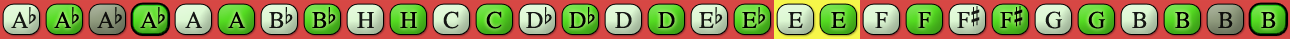
<style>
.page{position:relative;width:1290px;height:39px}
.page>*{position:absolute;margin:0}
.t1{font:24px "OpusChords";color:#000000}
.t2{font:24px "OpusChords";letter-spacing:-0.05em;color:#000000}
</style>
<div class="page">
<p class="t1" style="left:957px;top:6px;width:23px;height:22px;opacity:0.9">F#</p>
<p class="t1" style="left:1000px;top:6px;width:23px;height:22px">F#</p>
<p class="t2" style="left:11px;top:7px;width:25px;height:21px;opacity:0.9">Ab</p>
<p class="t2" style="left:54px;top:7px;width:25px;height:21px">Ab</p>
<p class="t2" style="left:97px;top:7px;width:25px;height:21px;opacity:0.9">Ab</p>
<p class="t2" style="left:140px;top:7px;width:25px;height:21px">Ab</p>
<p class="t1" style="left:185px;top:11px;width:17px;height:17px;opacity:0.9">A</p>
<p class="t1" style="left:228px;top:11px;width:17px;height:17px">A</p>
<p class="t1" style="left:269px;top:7px;width:24px;height:21px;opacity:0.9">Bb</p>
<p class="t1" style="left:312px;top:7px;width:24px;height:21px">Bb</p>
<p class="t1" style="left:357px;top:12px;width:17px;height:16px;opacity:0.9">H</p>
<p class="t1" style="left:400px;top:12px;width:17px;height:16px">H</p>
<p class="t1" style="left:443px;top:11px;width:16px;height:18px;opacity:0.9">C</p>
<p class="t1" style="left:486px;top:11px;width:16px;height:18px">C</p>
<p class="t1" style="left:526px;top:7px;width:26px;height:21px;opacity:0.9">Db</p>
<p class="t1" style="left:569px;top:7px;width:26px;height:21px">Db</p>
<p class="t1" style="left:615px;top:12px;width:17px;height:16px;opacity:0.9">D</p>
<p class="t1" style="left:658px;top:12px;width:17px;height:16px">D</p>
<p class="t1" style="left:699px;top:7px;width:24px;height:21px;opacity:0.9">Eb</p>
<p class="t1" style="left:742px;top:7px;width:24px;height:21px">Eb</p>
<p class="t1" style="left:788px;top:12px;width:15px;height:16px;opacity:0.9">E</p>
<p class="t1" style="left:831px;top:12px;width:15px;height:16px">E</p>
<p class="t1" style="left:875px;top:12px;width:13px;height:16px;opacity:0.9">F</p>
<p class="t1" style="left:918px;top:12px;width:13px;height:16px">F</p>
<p class="t1" style="left:1045px;top:11px;width:17px;height:18px;opacity:0.9">G</p>
<p class="t1" style="left:1088px;top:11px;width:17px;height:18px">G</p>
<p class="t1" style="left:1132px;top:12px;width:15px;height:16px;opacity:0.9">B</p>
<p class="t1" style="left:1175px;top:12px;width:15px;height:16px">B</p>
<p class="t1" style="left:1218px;top:12px;width:15px;height:16px;opacity:0.9">B</p>
<p class="t1" style="left:1261px;top:12px;width:15px;height:16px">B</p>
</div>
